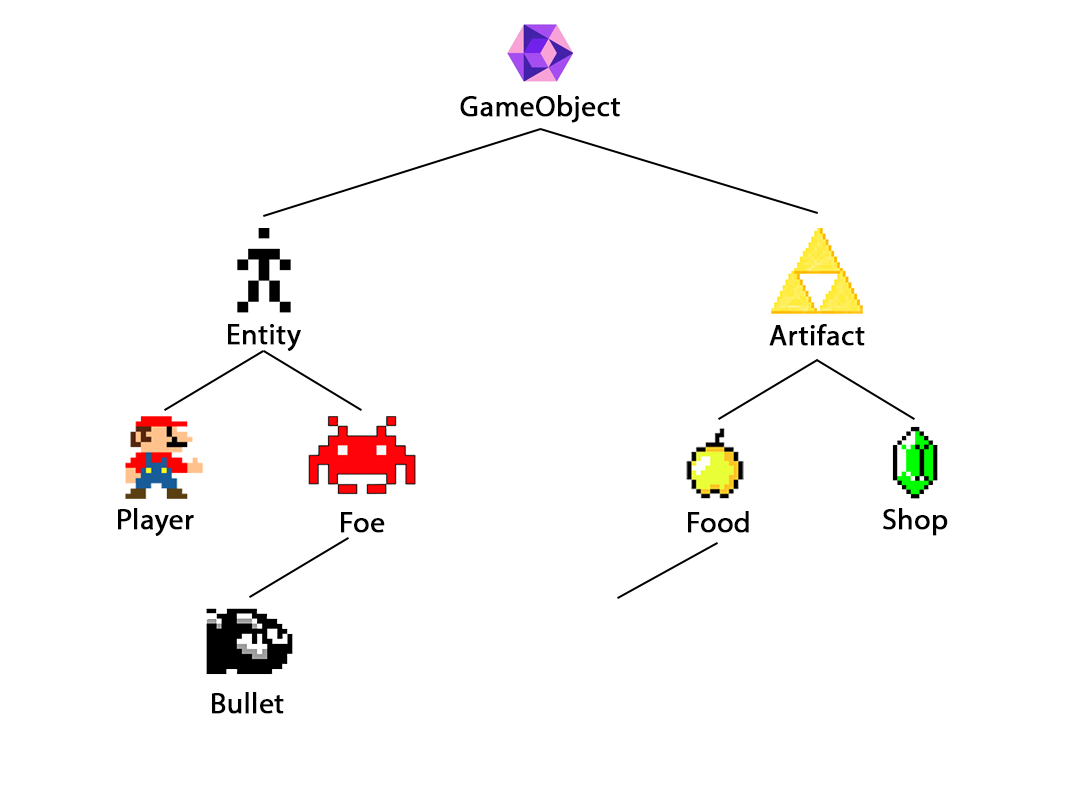
<style>
.page{position:relative;width:1080px;height:800px;background:#ffffff}
.page>*{position:absolute;margin:0}
.t1{font:29.2px "MyriadPro-Regular";color:#000000;font-weight:bold}
</style>
<div class="page">
<p class="t1" style="left:460px;top:95px;width:160px;height:28px">GameObject</p>
<p class="t1" style="left:228px;top:324px;width:73px;height:27px">Entity</p>
<p class="t1" style="left:769px;top:324px;width:96px;height:22px">Artifact</p>
<p class="t1" style="left:118px;top:508px;width:76px;height:28px">Player</p>
<p class="t1" style="left:883px;top:508px;width:65px;height:28px">Shop</p>
<p class="t1" style="left:341px;top:512px;width:44px;height:21px">Foe</p>
<p class="t1" style="left:688px;top:511px;width:61px;height:22px">Food</p>
<p class="t1" style="left:212px;top:692px;width:72px;height:22px">Bullet</p>
</div>
